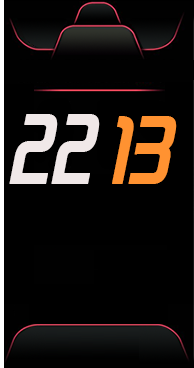
<style>
.page{position:relative;width:194px;height:368px;background:#000000}
.page>*{position:absolute;margin:0}
.t1{font:79.2px "Zekton-BoldItalic";letter-spacing:-0.005em;color:#f0e8e8;text-transform:uppercase;font-weight:bold;scale:0.91 1}
.t2{font:75.6px "Zekton-BoldItalic";letter-spacing:-0.005em;color:#ff9231;text-transform:uppercase;font-weight:bold;scale:0.95 1}
</style>
<div class="page">
<p class="t1" style="left:9px;top:114px;width:91px;height:70px">22</p>
<p class="t2" style="left:112px;top:116px;width:65px;height:68px">13</p>
</div>
